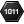
<style>
.page{position:relative;width:24px;height:24px;background:#ffffff}
.page>*{position:absolute;margin:0}
.t1{font:7px "ArialMT";color:#ffffff}
</style>
<div class="page">
<p class="t1" style="left:4px;top:9px;width:14px;height:5px">1011</p>
</div>
